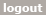
<style>
.page{position:relative;width:46px;height:15px;background:#afa9a4}
.page>*{position:absolute;margin:0}
.t1{font:11px "Verdana-Bold";color:#ffffff}
</style>
<div class="page">
<p class="t1" style="left:3px;top:3px;width:40px;height:11px">logout</p>
</div>
